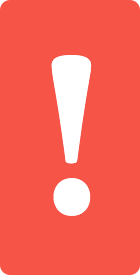
<style>
.page{position:relative;width:140px;height:275px;background:#f65446}
.page>*{position:absolute;margin:0}
.t1{font:236.7px "MinionPro-Bold";letter-spacing:0.08em;color:#ffffff}
</style>
<div class="page">
<p class="t1" style="left:51px;top:55px;width:41px;height:161px">!</p>
</div>
